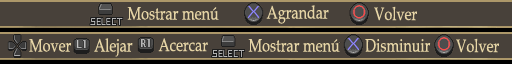
<style>
.page{position:relative;width:512px;height:64px;background:#48413a}
.page>*{position:absolute;margin:0}
.t1{font:18px "BookAntiqua";color:#e6d5a6;scale:0.8 1}
</style>
<div class="page">
<p class="t1" style="left:266px;top:5px;width:63px;height:19px">Agrandar</p>
<p class="t1" style="left:374px;top:6px;width:43px;height:15px">Volver</p>
<p class="t1" style="left:127px;top:7px;width:92px;height:13px">Mostrar menú</p>
<p class="t1" style="left:29px;top:39px;width:42px;height:13px">Mover</p>
<p class="t1" style="left:94px;top:38px;width:39px;height:19px">Alejar</p>
<p class="t1" style="left:158px;top:38px;width:50px;height:14px">Acercar</p>
<p class="t1" style="left:248px;top:39px;width:92px;height:13px">Mostrar menú</p>
<p class="t1" style="left:365px;top:39px;width:66px;height:13px">Disminuir</p>
<p class="t1" style="left:456px;top:38px;width:43px;height:15px">Volver</p>
</div>
